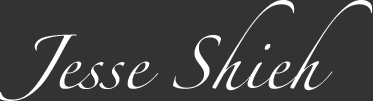
<style>
.page{position:relative;width:373px;height:101px;background:#333333}
.page>*{position:absolute;margin:0}
.t1{font:48px "Zapfino";color:#ffffff}
</style>
<div class="page">
<p class="t1" style="left:0px;top:0px;width:373px;height:101px">Jesse Shieh</p>
</div>
